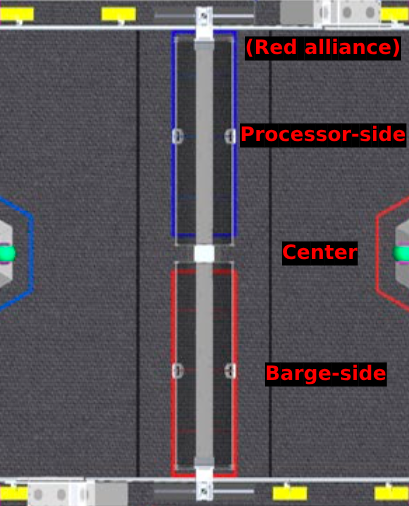
<style>
.page{position:relative;width:409px;height:506px}
.page>*{position:absolute;margin:0}
.t1{font:20px "DejaVuSans-Bold"}
</style>
<div class="page">
<p class="t1" style="left:245px;top:36px;width:157px;height:25px">(Red alliance)</p>
<p class="t1" style="left:240px;top:123px;width:167px;height:25px">Processor-side</p>
<p class="t1" style="left:282px;top:241px;width:76px;height:25px">Center</p>
<p class="t1" style="left:265px;top:362px;width:122px;height:25px">Barge-side</p>
</div>
